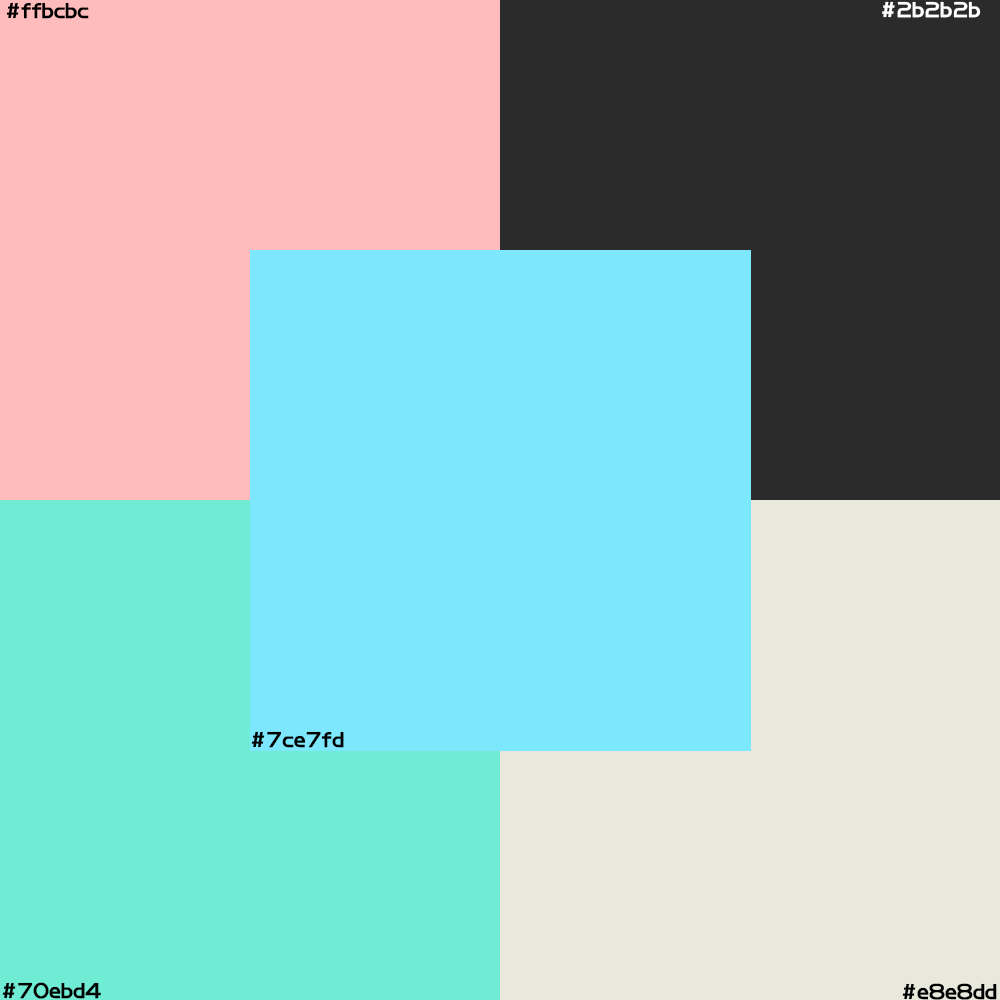
<style>
.page{position:relative;width:1000px;height:1000px;background:#7ce7fd}
.page>*{position:absolute;margin:0}
.t1{font:22.6px "BDZYJT--GB1-0";color:#000000;font-weight:bold}
.t2{font:22.6px "BDZYJT--GB1-0";color:#ffffff;font-weight:bold}
</style>
<div class="page">
<p class="t1" style="left:6px;top:2px;width:83px;height:17px">#ffbcbc</p>
<p class="t2" style="left:882px;top:1px;width:99px;height:17px">#2b2b2b</p>
<p class="t1" style="left:251px;top:731px;width:93px;height:17px">#7ce7fd</p>
<p class="t1" style="left:2px;top:982px;width:99px;height:17px">#70ebd4</p>
<p class="t1" style="left:902px;top:983px;width:95px;height:17px">#e8e8dd</p>
</div>
